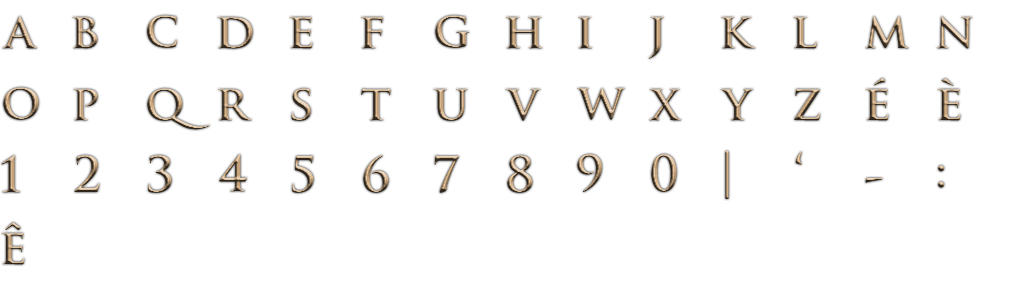
<style>
.page{position:relative;width:1024px;height:288px;background:#ffffff}
.page>*{position:absolute;margin:0}
.t1{font:48px "TrajanPro-Bold";letter-spacing:0.75em}
</style>
<div class="page">
<p class="t1" style="left:2px;top:16px;width:36px;height:33px">a</p>
<p class="t1" style="left:72px;top:17px;width:26px;height:32px">b</p>
<p class="t1" style="left:147px;top:15px;width:30px;height:33px">c</p>
<p class="t1" style="left:217px;top:17px;width:36px;height:32px">d</p>
<p class="t1" style="left:289px;top:16px;width:24px;height:33px">e</p>
<p class="t1" style="left:361px;top:16px;width:22px;height:33px">f</p>
<p class="t1" style="left:435px;top:15px;width:35px;height:33px">g</p>
<p class="t1" style="left:505px;top:17px;width:38px;height:32px">h</p>
<p class="t1" style="left:578px;top:17px;width:15px;height:32px">i</p>
<p class="t1" style="left:648px;top:17px;width:16px;height:42px">j</p>
<p class="t1" style="left:721px;top:17px;width:35px;height:32px">k</p>
<p class="t1" style="left:793px;top:17px;width:24px;height:32px">l</p>
<p class="t1" style="left:865px;top:16px;width:44px;height:33px">m</p>
<p class="t1" style="left:936px;top:16px;width:37px;height:33px">n</p>
<p class="t1" style="left:865px;top:78px;width:24px;height:43px">é</p>
<p class="t1" style="left:937px;top:78px;width:24px;height:43px">è</p>
<p class="t1" style="left:3px;top:87px;width:36px;height:33px">o</p>
<p class="t1" style="left:73px;top:89px;width:25px;height:32px">p</p>
<p class="t1" style="left:147px;top:88px;width:63px;height:42px">q</p>
<p class="t1" style="left:218px;top:89px;width:34px;height:32px">r</p>
<p class="t1" style="left:291px;top:88px;width:20px;height:33px">s</p>
<p class="t1" style="left:361px;top:88px;width:30px;height:33px">t</p>
<p class="t1" style="left:433px;top:89px;width:35px;height:32px">u</p>
<p class="t1" style="left:505px;top:89px;width:36px;height:32px">v</p>
<p class="t1" style="left:577px;top:88px;width:49px;height:32px">w</p>
<p class="t1" style="left:649px;top:89px;width:33px;height:32px">x</p>
<p class="t1" style="left:720px;top:89px;width:34px;height:32px">y</p>
<p class="t1" style="left:794px;top:88px;width:26px;height:33px">z</p>
<p class="t1" style="left:1px;top:155px;width:20px;height:38px">1</p>
<p class="t1" style="left:74px;top:155px;width:26px;height:37px">2</p>
<p class="t1" style="left:148px;top:155px;width:24px;height:38px">3</p>
<p class="t1" style="left:219px;top:154px;width:28px;height:38px">4</p>
<p class="t1" style="left:292px;top:155px;width:22px;height:38px">5</p>
<p class="t1" style="left:363px;top:155px;width:26px;height:38px">6</p>
<p class="t1" style="left:434px;top:155px;width:25px;height:38px">7</p>
<p class="t1" style="left:507px;top:155px;width:26px;height:38px">8</p>
<p class="t1" style="left:577px;top:154px;width:25px;height:38px">9</p>
<p class="t1" style="left:651px;top:154px;width:26px;height:38px">0</p>
<p class="t1" style="left:725px;top:151px;width:4px;height:48px">|</p>
<p class="t1" style="left:795px;top:151px;width:7px;height:14px">‘</p>
<p class="t1" style="left:938px;top:165px;width:6px;height:23px">:</p>
<p class="t1" style="left:865px;top:178px;width:18px;height:5px">-</p>
<p class="t1" style="left:1px;top:222px;width:24px;height:43px">ê</p>
</div>
